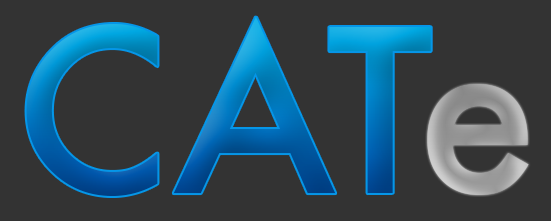
<style>
.page{position:relative;width:551px;height:221px;background:#333333}
.page>*{position:absolute;margin:0}
.t1{font:219.9px "Futura-Medium"}
.t2{font:219.9px "Futura-Medium";color:#9b9b9b}
</style>
<div class="page">
<p class="t1" style="left:26px;top:17px;width:405px;height:179px">CAT</p>
<p class="t2" style="left:427px;top:84px;width:102px;height:111px">e</p>
</div>
